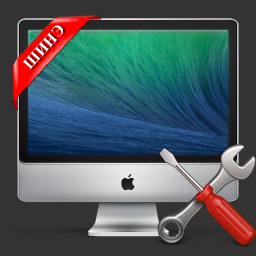
<style>
.page{position:relative;width:256px;height:256px;background:#333333}
.page>*{position:absolute;margin:0}
.t1{font:16px "TimesNewRomanPS-BoldMT";color:#ffffff}
</style>
<div class="page">
<p class="t1" style="left:22px;top:25px;width:41px;height:45px;rotate:-48deg">ШИНЭ</p>
</div>
